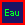
<style>
.page{position:relative;width:25px;height:25px;background:#1b1464}
.page>*{position:absolute;margin:0}
.t1{font:9px "MicrosoftSansSerif";color:#00ff24}
</style>
<div class="page">
<p class="t1" style="left:5px;top:9px;width:14px;height:7px">Eau</p>
</div>
